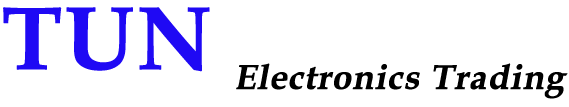
<style>
.page{position:relative;width:569px;height:107px;background:#ffffff}
.page>*{position:absolute;margin:0}
.t1{font:60px "BookAntiqua-Bold";color:#000000;font-weight:bold;font-style:italic}
.t2{font:90px "BookAntiqua-Bold";color:#1f09f4;font-weight:bold}
</style>
<div class="page">
<p class="t1" style="left:3px;top:7px;width:565px;height:92px"><span class="t2">TUN </span>Electronics Trading</p>
</div>
